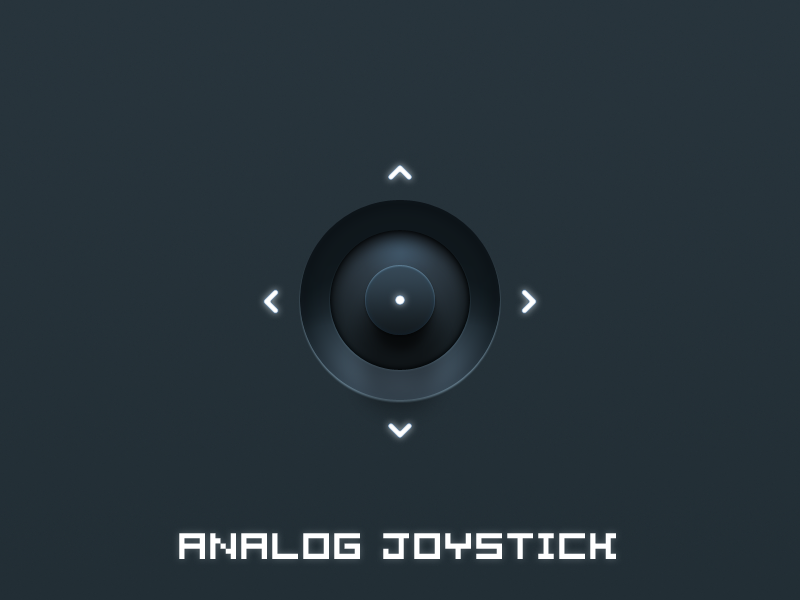
<style>
.page{position:relative;width:800px;height:600px}
.page>*{position:absolute;margin:0}
.t1{font:36px "Pixelation";color:#ffffff}
</style>
<div class="page">
<p class="t1" style="left:179px;top:533px;width:437px;height:26px">Analog Joystick</p>
</div>
